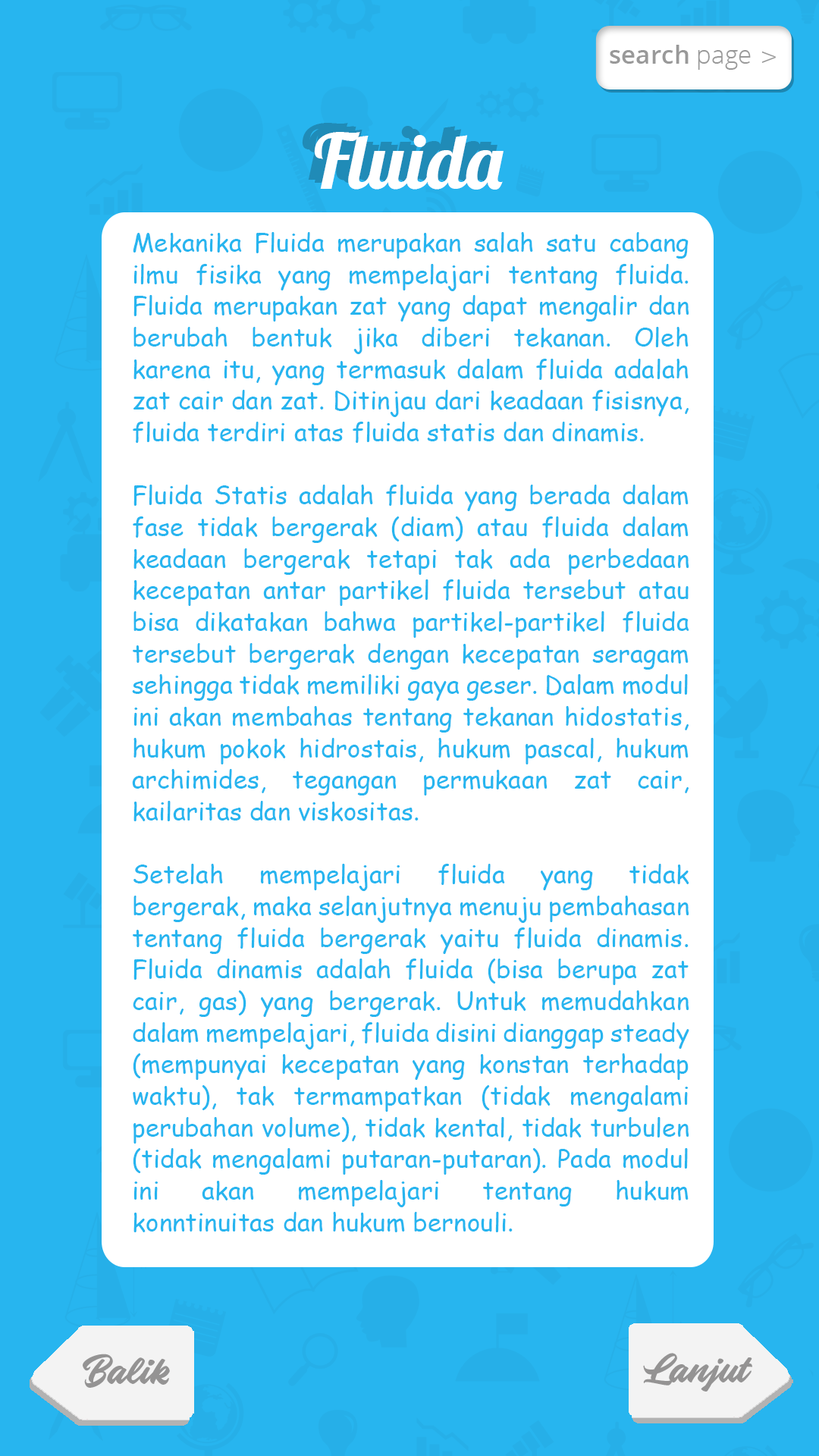
<style>
.page{position:relative;width:819px;height:1456px;background:#ffffff}
.page>*{position:absolute;margin:0}
.t1{font:75.7px "Lobster-Regular";color:#208bb7}
.t2{font:75.7px "Lobster-Regular";color:#ffffff}
.t3{font:25.3px/31.6px "ComicSansMS";color:#27b5ef}
</style>
<div class="page">
<p class="t1" style="left:302px;top:123px;width:189px;height:57px">Fluida</p>
<p class="t2" style="left:314px;top:132px;width:190px;height:58px">Fluida</p>
<p class="t3" style="left:132px;top:232px;width:557px;height:1000px;text-align:justify">Mekanika Fluida merupakan salah satu cabang ilmu fisika yang mempelajari tentang fluida. Fluida merupakan zat yang dapat mengalir dan berubah bentuk jika diberi tekanan. Oleh karena itu, yang termasuk dalam fluida adalah zat cair dan zat. Ditinjau dari keadaan fisisnya, fluida terdiri atas fluida statis dan dinamis. <br><br>Fluida Statis adalah fluida yang berada dalam fase tidak bergerak (diam) atau fluida dalam keadaan bergerak tetapi tak ada perbedaan kecepatan antar partikel fluida tersebut atau bisa dikatakan bahwa partikel-partikel fluida tersebut bergerak dengan kecepatan seragam sehingga tidak memiliki gaya geser. Dalam modul ini akan membahas tentang tekanan hidostatis, hukum pokok hidrostais, hukum pascal, hukum archimides, tegangan permukaan zat cair, kailaritas dan viskositas.<br><br>Setelah mempelajari fluida yang tidak bergerak, maka selanjutnya menuju pembahasan tentang fluida bergerak yaitu fluida dinamis. Fluida dinamis adalah fluida (bisa berupa zat cair, gas) yang bergerak. Untuk memudahkan dalam mempelajari, fluida disini dianggap steady (mempunyai kecepatan yang konstan terhadap waktu), tak termampatkan (tidak mengalami perubahan volume), tidak kental, tidak turbulen (tidak mengalami putaran-putaran). Pada modul ini akan mempelajari tentang hukum konntinuitas dan hukum bernouli.</p>
</div>
